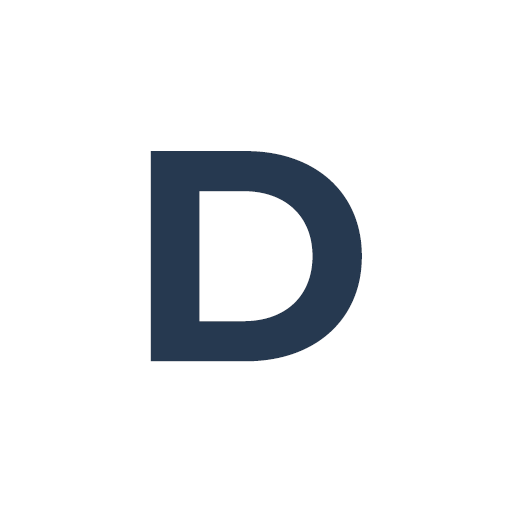
<style>
.page{position:relative;width:512px;height:512px;background:#ffffff}
.page>*{position:absolute;margin:0}
.t1{font:300px "Montserrat-Bold";color:#263950}
</style>
<div class="page">
<p class="t1" style="left:150px;top:151px;width:212px;height:211px">D</p>
</div>
